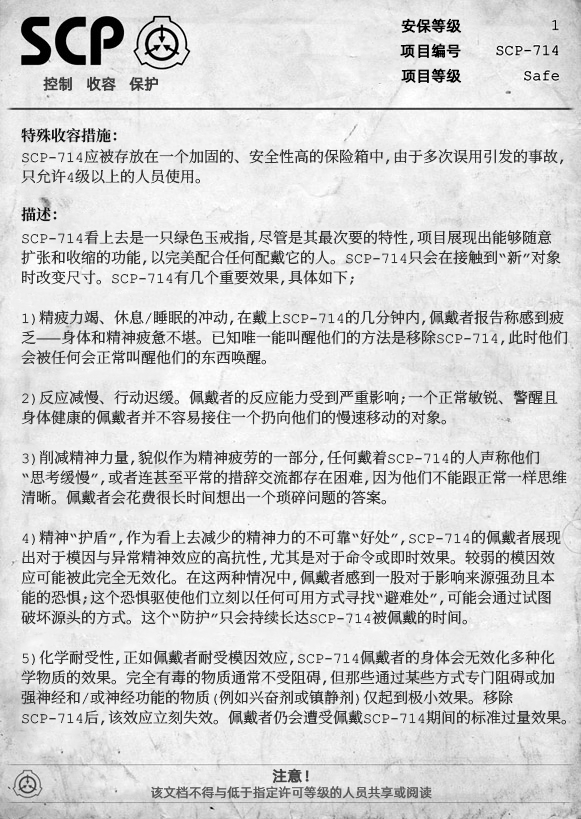
<style>
.page{position:relative;width:581px;height:819px}
.page>*{position:absolute;margin:0}
.t1{font:15px "AlibabaPuHuiTiR";color:#000000;font-weight:bold}
.t2{font:15px "AlibabaPuHuiTiR";color:#3d3d3d;font-weight:bold}
.t3{font:15px "ContainmentBreach-Bold";color:#121212}
.t4{font:15px/20px "ContainmentBreach-Regular";color:#353535}
.t5{font:15px "AlibabaPuHuiTiR";color:#414141;font-weight:bold}
.t6{font:13px "AlibabaPuHuiTiR";color:#575757}
</style>
<div class="page">
<p class="t1" style="left:401px;top:18px;width:61px;height:15px">安保等级</p>
<p class="t1" style="left:400px;top:43px;width:61px;height:15px">项目编号</p>
<p class="t2" style="left:43px;top:76px;width:115px;height:15px">控制   收容   保护</p>
<p class="t1" style="left:401px;top:68px;width:61px;height:15px">项目等级</p>
<p class="t3" style="left:21px;top:128px;width:96px;height:15px">特殊收容措施：</p>
<p class="t4" style="left:21px;top:149px;width:543px;height:35px">SCP-714应被存放在一个加固的、安全性高的保险箱中，由于多次误用引发的事故，<br>只允许4级以上的人员使用。</p>
<p class="t3" style="left:21px;top:207px;width:36px;height:15px">描述：</p>
<p class="t4" style="left:21px;top:230px;width:547px;height:496px">SCP-714看上去是一只绿色玉戒指，尽管是其最次要的特性，项目展现出能够随意<br>扩张和收缩的功能，以完美配合任何配戴它的人。SCP-714只会在接触到“新”对象<br>时改变尺寸。SCP-714有几个重要效果，具体如下；<br><br>1）精疲力竭、休息/睡眠的冲动,在戴上SCP-714的几分钟内，佩戴者报告称感到疲<br>乏——身体和精神疲惫不堪。已知唯一能叫醒他们的方法是移除SCP-714，此时他们<br>会被任何会正常叫醒他们的东西唤醒。<br><br>2）反应减慢、行动迟缓。佩戴者的反应能力受到严重影响；一个正常敏锐、警醒且<br>身体健康的佩戴者并不容易接住一个扔向他们的慢速移动的对象。<br><br>3）削减精神力量，貌似作为精神疲劳的一部分，任何戴着SCP-714的人声称他们<br>“思考缓慢”，或者连甚至平常的措辞交流都存在困难，因为他们不能跟正常一样思维<br>清晰。佩戴者会花费很长时间想出一个琐碎问题的答案。<br><br>4）精神“护盾”，作为看上去减少的精神力的不可靠“好处”，SCP-714的佩戴者展现<br>出对于模因与异常精神效应的高抗性，尤其是对于命令或即时效果。较弱的模因效<br>应可能被此完全无效化。在这两种情况中，佩戴者感到一股对于影响来源强劲且本<br>能的恐惧；这个恐惧驱使他们立刻以任何可用方式寻找“避难处”，可能会通过试图<br>破坏源头的方式。这个“防护”只会持续长达SCP-714被佩戴的时间。<br><br>5）化学耐受性，正如佩戴者耐受模因效应，SCP-714佩戴者的身体会无效化多种化<br>学物质的效果。完全有毒的物质通常不受阻碍，但那些通过某些方式专门阻碍或加<br>强神经和/或神经功能的物质（例如兴奋剂或镇静剂）仅起到极小效果。移除<br>SCP-714后，该效应立刻失效。佩戴者仍会遭受佩戴SCP-714期间的标准过量效果。</p>
<p class="t5" style="left:272px;top:768px;width:37px;height:15px">注意！</p>
<p class="t6" style="left:151px;top:786px;width:281px;height:13px">该文档不得与低于指定许可等级的人员共享或阅读</p>
</div>
